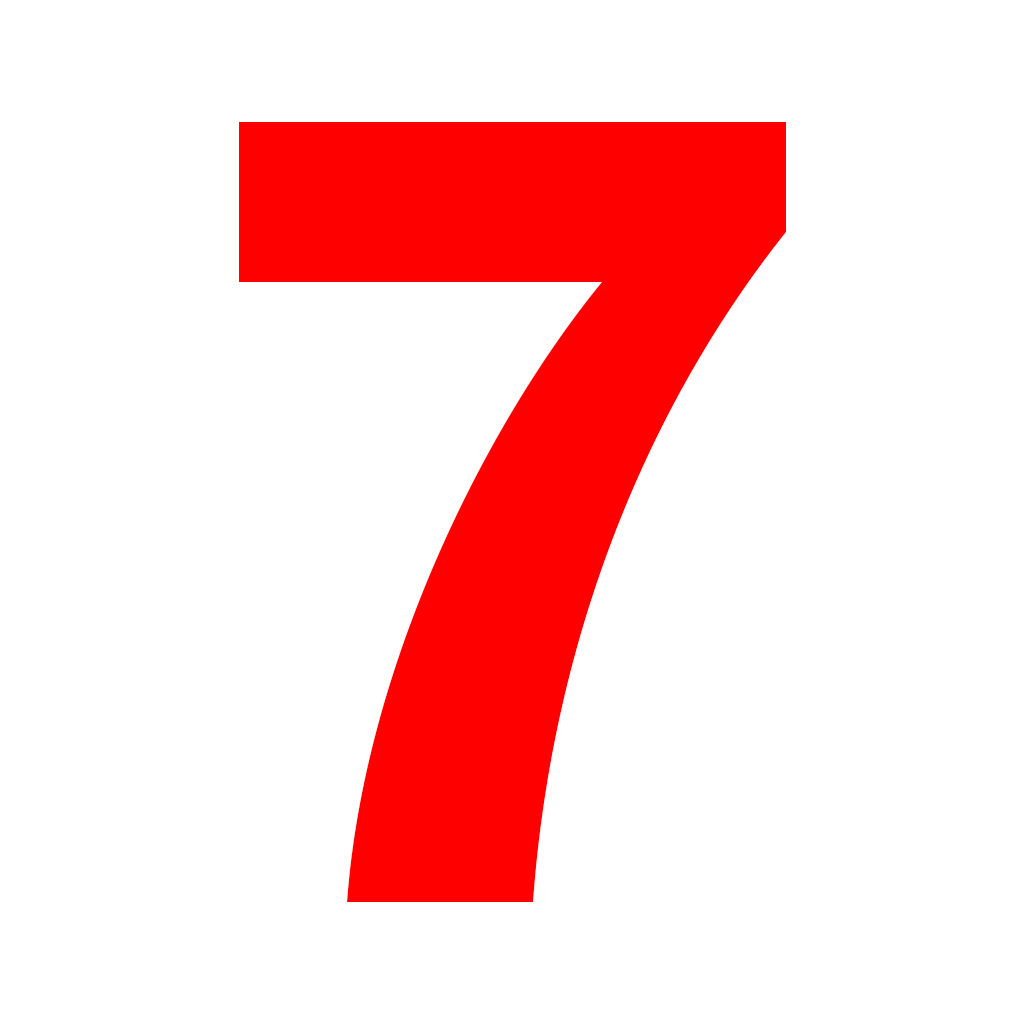
<style>
.page{position:relative;width:1024px;height:1024px;background:#ffffff}
.page>*{position:absolute;margin:0}
.t1{font:1000px "ToppanBunkyuMidashiGothicStdN-ExtraBold";color:#ff0000}
</style>
<div class="page">
<p class="t1" style="left:239px;top:122px;width:547px;height:780px">7</p>
</div>
